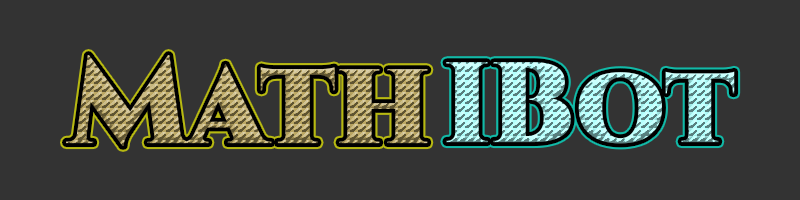
<style>
.page{position:relative;width:800px;height:200px;background:#333333}
.page>*{position:absolute;margin:0}
.t1{font:123.4px "Cinzel-Black"}
.t2{font:113.9px "Cinzel-Black"}
</style>
<div class="page">
<p class="t1" style="left:66px;top:55px;width:362px;height:91px">Math</p>
<p class="t2" style="left:446px;top:62px;width:289px;height:82px">IBot</p>
</div>
